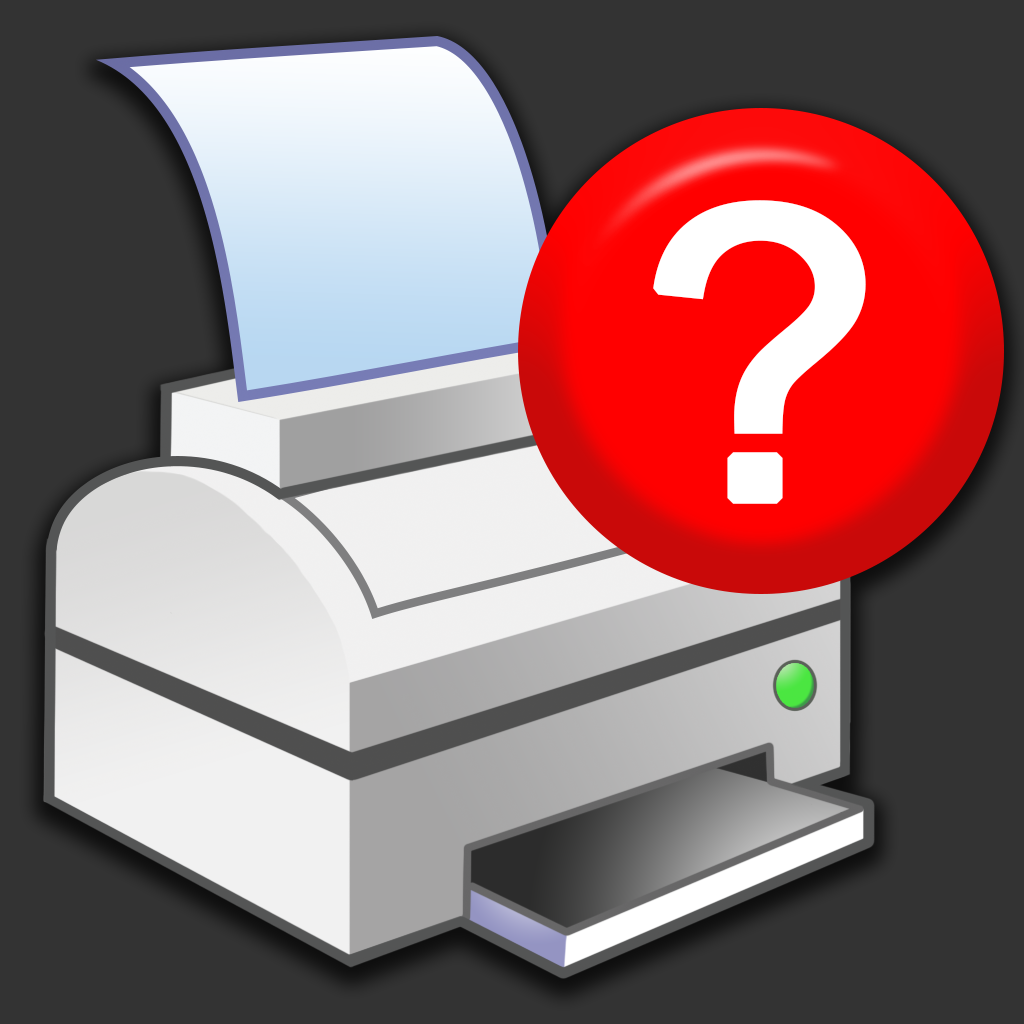
<style>
.page{position:relative;width:1024px;height:1024px;background:#333333}
.page>*{position:absolute;margin:0}
.t1{font:400px "ArialMT";letter-spacing:-0.025em;color:#ffffff;font-weight:bold;scale:1.09 1}
</style>
<div class="page">
<p class="t1" style="left:653px;top:200px;width:213px;height:304px">?</p>
</div>
